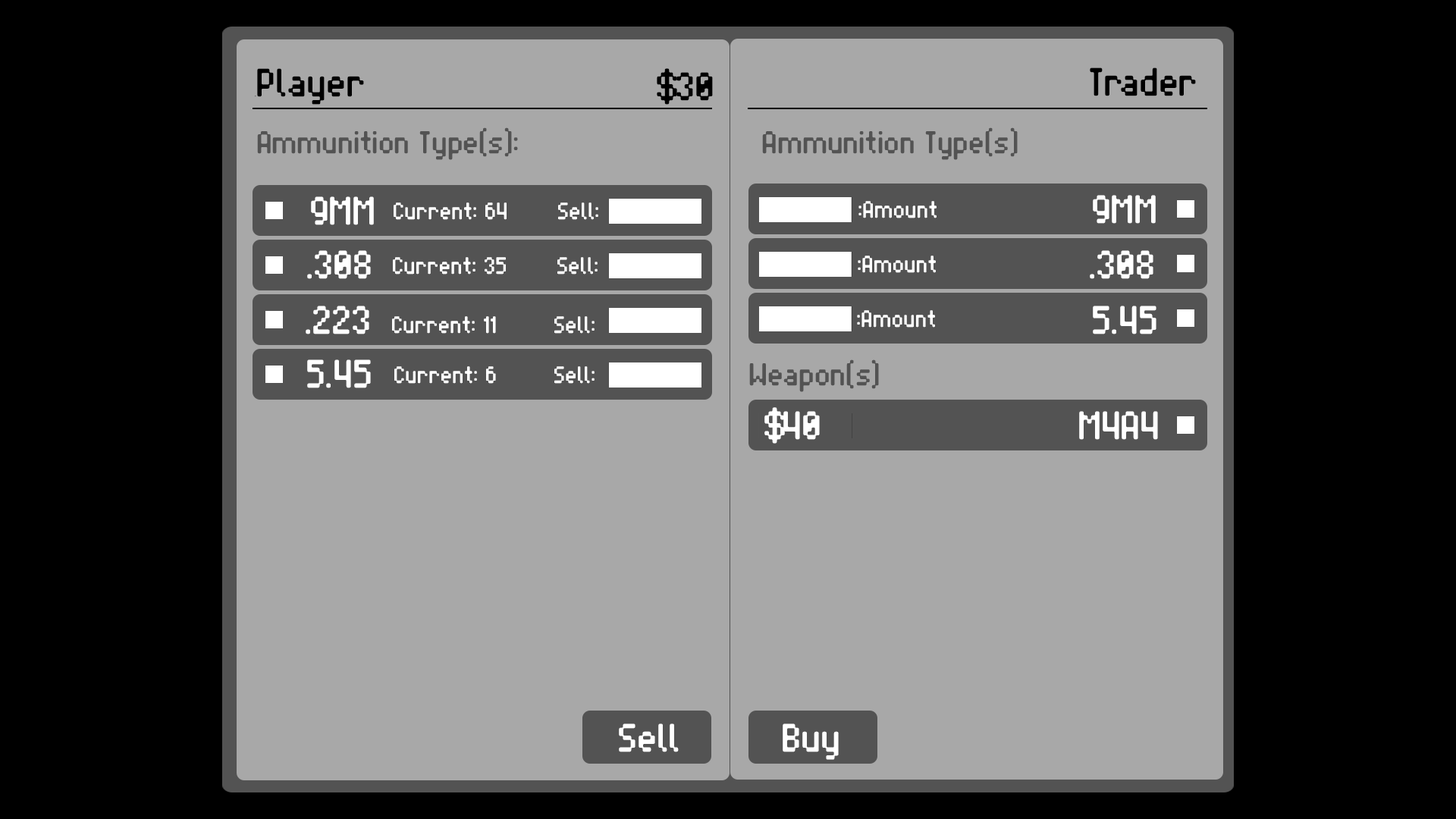
<style>
.page{position:relative;width:1456px;height:819px;background:#a8a8a8}
.page>*{position:absolute;margin:0}
.t1{font:40.1px "BlrrpixStrict";color:#000000}
.t2{font:0.8px "BlrrpixStrict";color:#000000}
.t3{font:32.1px "BlrrpixStrict";color:#535353}
.t4{font:40.1px "BlrrpixStrict";color:#ffffff}
.t5{font:24.1px "BlrrpixStrict";color:#ffffff}
</style>
<div class="page">
<p class="t1" style="left:255px;top:68px;width:109px;height:37px"><span class="t2">d</span>Player</p>
<p class="t1" style="left:657px;top:68px;width:56px;height:37px">$30</p>
<p class="t1" style="left:1090px;top:67px;width:106px;height:29px">Trader</p>
<p class="t3" style="left:257px;top:127px;width:261px;height:33px">Ammunition Type(s):</p>
<p class="t3" style="left:762px;top:127px;width:256px;height:33px">Ammunition Type(s)</p>
<p class="t4" style="left:311px;top:196px;width:63px;height:29px">9MM</p>
<p class="t4" style="left:1093px;top:195px;width:63px;height:29px">9MM</p>
<p class="t5" style="left:394px;top:202px;width:204px;height:18px">Current: 64       Sell:</p>
<p class="t5" style="left:858px;top:201px;width:79px;height:17px">:Amount</p>
<p class="t4" style="left:307px;top:250px;width:64px;height:29px">.308</p>
<p class="t5" style="left:393px;top:257px;width:205px;height:18px">Current: 35       Sell:</p>
<p class="t5" style="left:858px;top:256px;width:78px;height:17px">:Amount</p>
<p class="t4" style="left:1090px;top:250px;width:63px;height:29px">.308</p>
<p class="t4" style="left:306px;top:306px;width:63px;height:28px">.223</p>
<p class="t4" style="left:1093px;top:306px;width:63px;height:28px">5.45</p>
<p class="t5" style="left:392px;top:316px;width:203px;height:18px">Current: 11        Sell:</p>
<p class="t5" style="left:857px;top:310px;width:78px;height:18px">:Amount</p>
<p class="t4" style="left:307px;top:359px;width:64px;height:29px">5.45</p>
<p class="t5" style="left:394px;top:366px;width:201px;height:18px">Current: 6        Sell:</p>
<p class="t4" style="left:764px;top:407px;width:56px;height:37px">$40</p>
<p class="t4" style="left:1079px;top:411px;width:79px;height:29px">M4A4</p>
<p class="t4" style="left:619px;top:723px;width:60px;height:29px">Sell</p>
<p class="t4" style="left:783px;top:723px;width:56px;height:37px">Buy</p>
</div>
